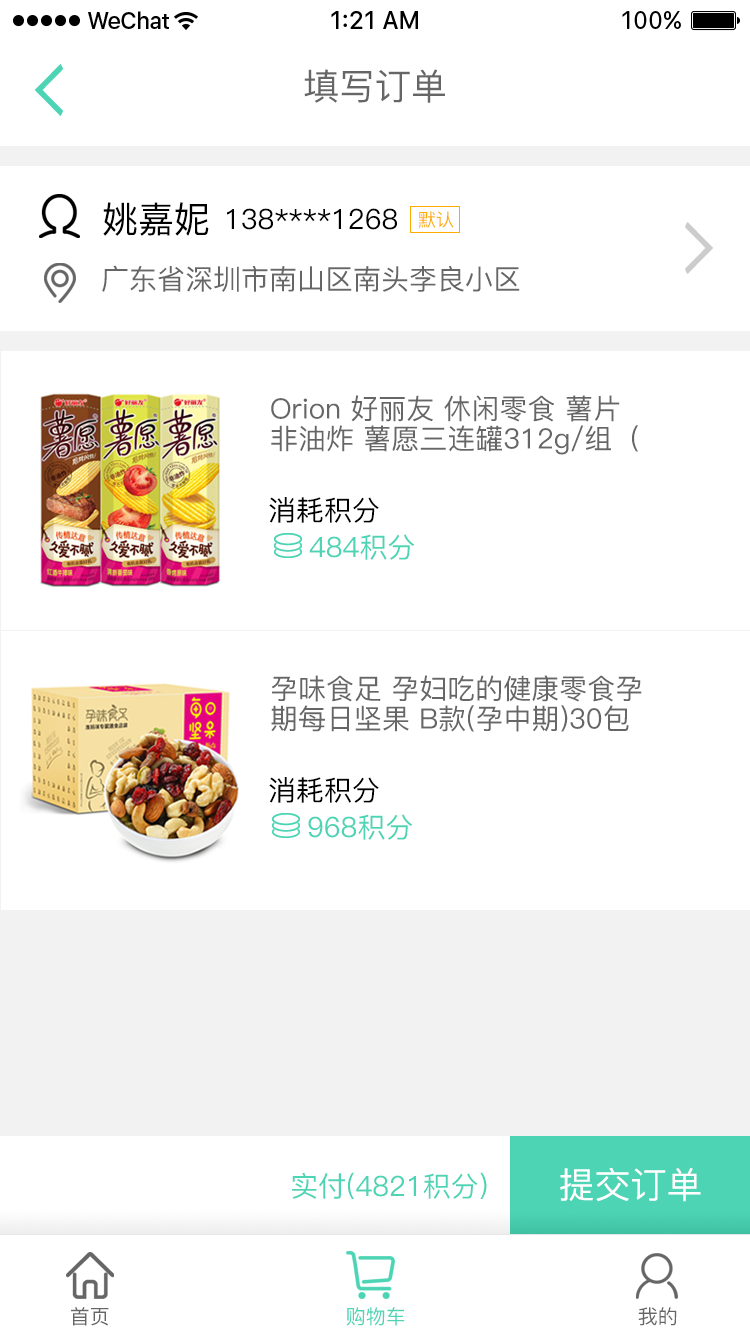
<style>
.page{position:relative;width:750px;height:1334px;background:#ffffff}
.page>*{position:absolute;margin:0}
.t1{font:36px "PingFang-SC-Medium";color:#666666}
.t2{font:36px "PingFang-SC-Medium";color:#000000}
.t3{font:28px "PingFang-SC-Medium";color:#000000}
.t4{font:18px "PingFang-SC-Medium";color:#fcac00}
.t5{font:28px "PingFang-SC-Medium";color:#666666}
.t6{font:28px/30px "PingFang-SC-Medium";color:#666666}
.t7{font:28px "PingFang-SC-Medium";color:#4cd4b4}
.t8{font:36px "PingFang-SC-Medium";color:#ffffff}
.t9{font:20px "PingFang-SC-Medium";color:#666666}
.t10{font:20px "PingFang-SC-Medium";color:#4cd4b4}
</style>
<div class="page">
<p class="t1" style="left:304px;top:69px;width:141px;height:34px">填写订单</p>
<p class="t2" style="left:103px;top:202px;width:106px;height:34px">姚嘉妮</p>
<p class="t3" style="left:227px;top:208px;width:170px;height:22px">138****1268</p>
<p class="t4" style="left:419px;top:211px;width:35px;height:17px">默认</p>
<p class="t5" style="left:102px;top:265px;width:418px;height:27px">广东省深圳市南山区南头李良小区</p>
<p class="t6" style="left:271px;top:395px;width:367px;height:60px">Orion 好丽友 休闲零食 薯片 非油炸 薯愿三连罐312g/组（104g*3薯片）</p>
<p class="t3" style="left:269px;top:497px;width:110px;height:26px">消耗积分</p>
<p class="t7" style="left:309px;top:534px;width:105px;height:26px">484积分</p>
<p class="t6" style="left:271px;top:675px;width:371px;height:57px">孕味食足 孕妇吃的健康零食孕期每日坚果 B款(孕中期)30包</p>
<p class="t3" style="left:269px;top:777px;width:110px;height:26px">消耗积分</p>
<p class="t7" style="left:308px;top:814px;width:104px;height:26px">968积分</p>
<p class="t8" style="left:560px;top:1167px;width:141px;height:35px">提交订单</p>
<p class="t7" style="left:292px;top:1172px;width:195px;height:27px">实付(4821积分)</p>
<p class="t9" style="left:71px;top:1307px;width:38px;height:19px">首页</p>
<p class="t10" style="left:346px;top:1307px;width:59px;height:19px">购物车</p>
<p class="t9" style="left:638px;top:1307px;width:39px;height:19px">我的</p>
</div>
